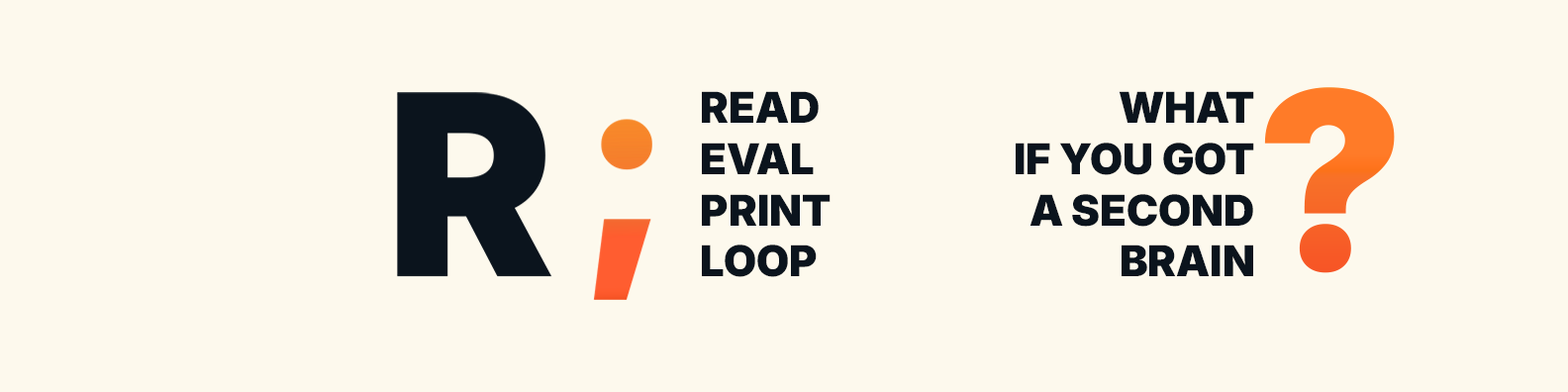
<style>
.page{position:relative;width:1568px;height:392px;background:#fdf9ed}
.page>*{position:absolute;margin:0}
.t1{font:42.6px "Inter18pt-Black";color:#0b141d}
</style>
<div class="page">
<p class="t1" style="left:702px;top:91px;width:129px;height:186px">READ<br>EVAL<br>PRINT<br>LOOP</p>
<p class="t1" style="left:1016px;top:91px;width:238px;height:185px;text-align:right">WHAT<br>IF YOU GOT<br>A SECOND<br>BRAIN</p>
</div>
